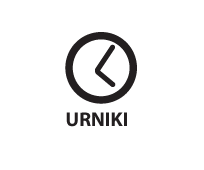
<style>
.page{position:relative;width:204px;height:170px;background:#ffffff}
.page>*{position:absolute;margin:0}
.t1{font:20px "MyriadPro-Bold";color:#231f20}
</style>
<div class="page">
<p class="t1" style="left:66px;top:112px;width:61px;height:15px">URNIKI</p>
</div>
